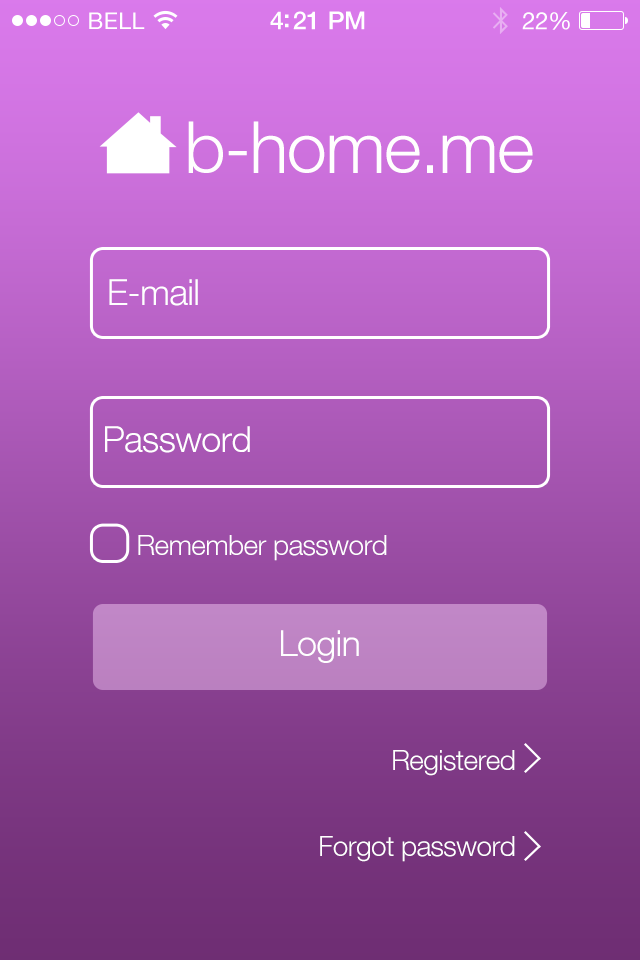
<style>
.page{position:relative;width:640px;height:960px}
.page>*{position:absolute;margin:0}
.t1{font:72px "HelveticaNeueLT-Light";letter-spacing:-0.02em;color:#fffefe}
.t2{font:36px "HelveticaNeueLT-Light";letter-spacing:-0.02em;color:#ffffff}
.t3{font:28px "HelveticaNeueLT-Light";letter-spacing:-0.02em;color:#ffffff}
</style>
<div class="page">
<p class="t1" style="left:188px;top:121px;width:345px;height:52px">b-home.me</p>
<p class="t2" style="left:109px;top:279px;width:89px;height:27px">E-mail</p>
<p class="t2" style="left:105px;top:426px;width:145px;height:27px">Password</p>
<p class="t3" style="left:138px;top:535px;width:249px;height:26px">Remember password</p>
<p class="t2" style="left:281px;top:630px;width:78px;height:33px">Login</p>
<p class="t3" style="left:393px;top:750px;width:122px;height:26px">Registered</p>
<p class="t3" style="left:320px;top:836px;width:195px;height:26px">Forgot password</p>
</div>
